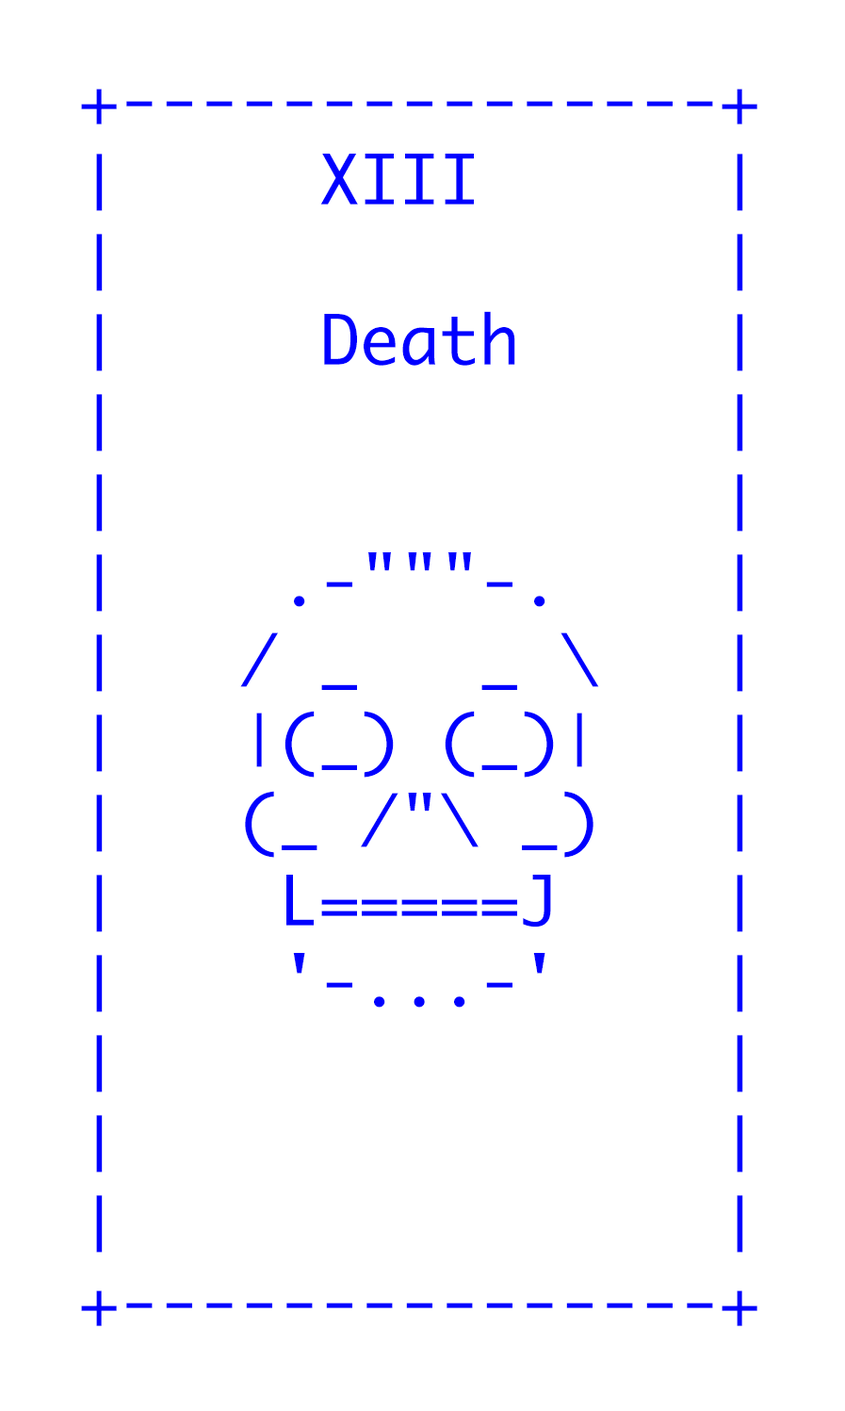
<style>
.page{position:relative;width:845px;height:1411px;background:#ffffff}
.page>*{position:absolute;margin:0}
.t1{font:66.7px "Monaco";color:#0000ff}
</style>
<div class="page">
<p class="t1" style="left:81px;top:89px;width:677px;height:1237px">+---------------+<br>│     XIII      │<br>│               │<br>│     Death     │<br>│               │<br>│               │<br>│    .-"""-.    │ <br>│   / _   _ \   │ <br>│   |(_) (_)|   │  <br>│   (_ /"\ _)   │    <br>│    L=====J    │ <br>│    '-...-'    │<br>│               │  <br>│               │<br>│               │<br>+---------------+</p>
</div>
